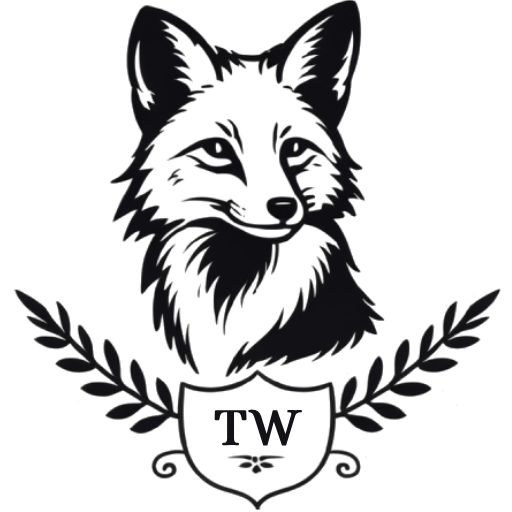
<style>
.page{position:relative;width:512px;height:512px;background:#ffffff}
.page>*{position:absolute;margin:0}
.t1{font:55.3px "Alice-Regular";color:#131217;font-weight:bold}
</style>
<div class="page">
<p class="t1" style="left:214px;top:409px;width:88px;height:37px">TW</p>
</div>
